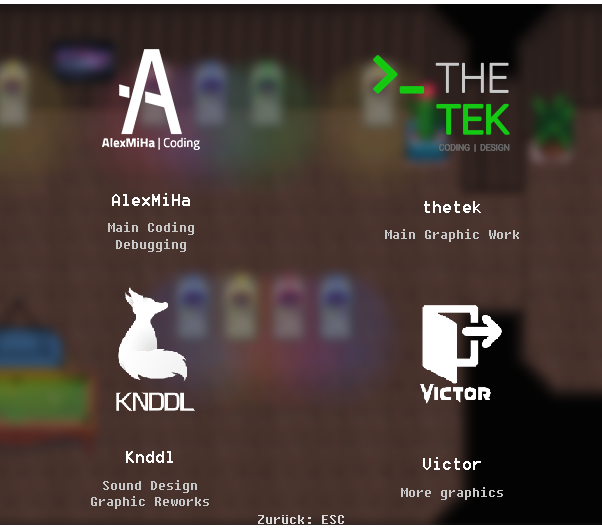
<style>
.page{position:relative;width:602px;height:529px}
.page>*{position:absolute;margin:0}
.t1{font:14px "Fixedsys";color:#c8c8c8}
.t2{font:18px "Fixedsys";color:#ffffff}
.t3{font:14.1px "Fixedsys";color:#c8c8c8}
.t4{font:18.1px "Fixedsys";color:#ffffff}
</style>
<div class="page">
<p class="t1" style="left:108px;top:193px;width:86px;height:59px;text-align:center"><span class="t2">AlexMiHa<br><br></span>Main Coding<br>Debugging</p>
<p class="t1" style="left:385px;top:201px;width:134px;height:41px;text-align:center"><span class="t2">thetek<br><br></span>Main Graphic Work</p>
<p class="t3" style="left:91px;top:451px;width:118px;height:58px;text-align:center"><span class="t4">Knddl<br><br></span>Sound Design<br>Graphic Reworks</p>
<p class="t3" style="left:401px;top:457px;width:102px;height:43px;text-align:center"><span class="t4">Victor<br><br></span>More graphics</p>
</div>
